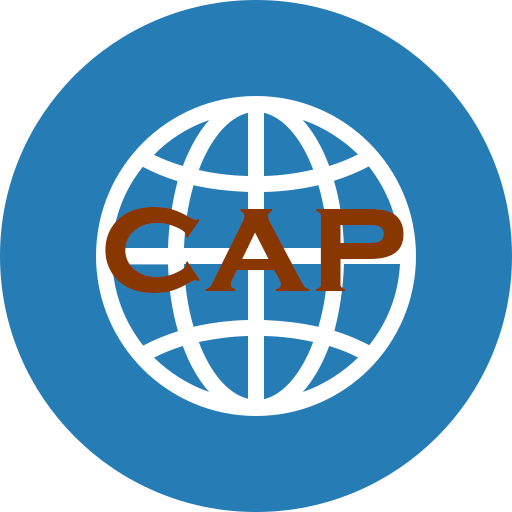
<style>
.page{position:relative;width:512px;height:512px;background:#267cb5}
.page>*{position:absolute;margin:0}
.t1{font:150px "CopperplateGothic-Bold";color:#893700}
</style>
<div class="page">
<p class="t1" style="left:105px;top:207px;width:299px;height:86px">cap</p>
</div>
